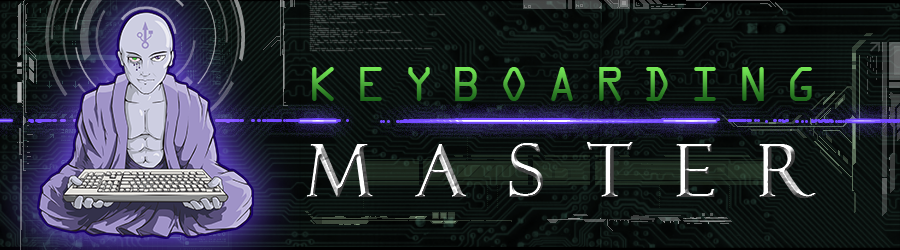
<style>
.page{position:relative;width:900px;height:250px}
.page>*{position:absolute;margin:0}
.t1{font:52px "OCRAExtended"}
.t2{font:72.2px "FelixTitlingMT";font-weight:bold}
</style>
<div class="page">
<p class="t1" style="left:312px;top:67px;width:500px;height:34px">KEYBOARDING</p>
<p class="t2" style="left:307px;top:142px;width:509px;height:56px">MASTER</p>
</div>
